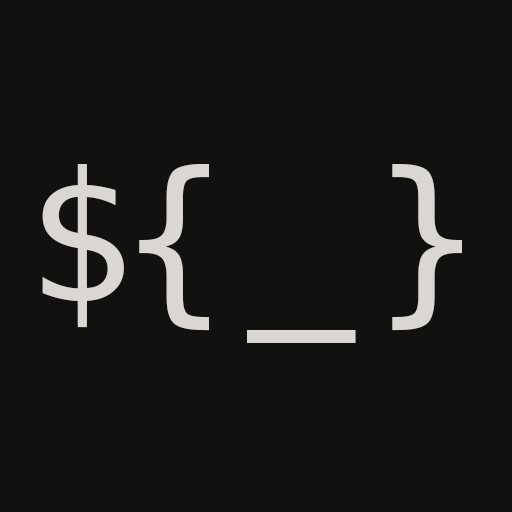
<style>
.page{position:relative;width:512px;height:512px;background:#131110}
.page>*{position:absolute;margin:0}
.t1{font:180px "DejaVuSansMonoPowerline";letter-spacing:0.1em;color:#dad7d2}
.t2{font:180px "DejaVuSansMonoPowerline";letter-spacing:-0.08em;color:#dad7d2}
</style>
<div class="page">
<p class="t1" style="left:42px;top:164px;width:420px;height:179px"><span class="t2">$</span>{_}</p>
</div>
